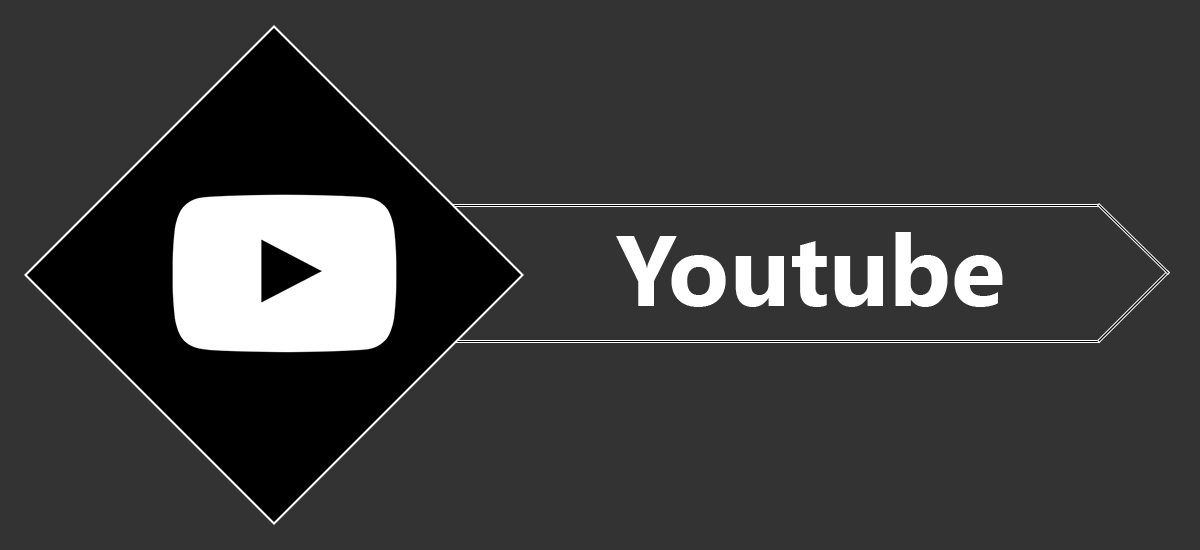
<style>
.page{position:relative;width:1200px;height:550px;background:#333333}
.page>*{position:absolute;margin:0}
.t1{font:100px "KhmerUI-Bold";color:#ffffff}
</style>
<div class="page">
<p class="t1" style="left:616px;top:232px;width:387px;height:75px">Youtube</p>
</div>
